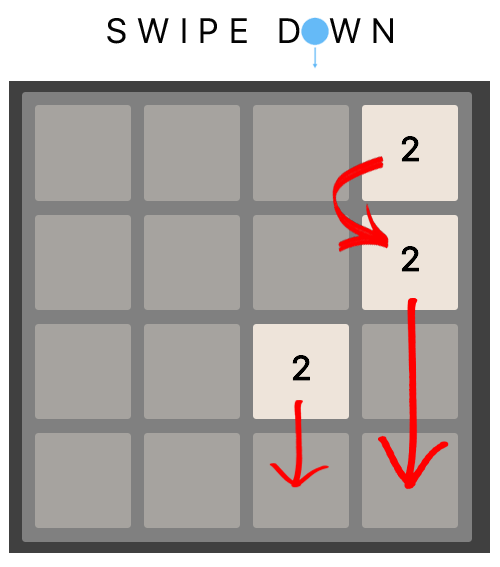
<style>
.page{position:relative;width:500px;height:567px;background:#a6a39f}
.page>*{position:absolute;margin:0}
.t1{font:35px "SFDisplay-Regular";letter-spacing:0.3em;color:#030303}
</style>
<div class="page">
<p class="t1" style="left:107px;top:18px;width:286px;height:26px">SWIPE D WN</p>
</div>
